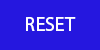
<style>
.page{position:relative;width:100px;height:50px;background:#2517df}
.page>*{position:absolute;margin:0}
.t1{font:20px "MyriadHebrew-Regular";color:#ffffff}
</style>
<div class="page">
<p class="t1" style="left:26px;top:17px;width:50px;height:14px">RESET</p>
</div>
